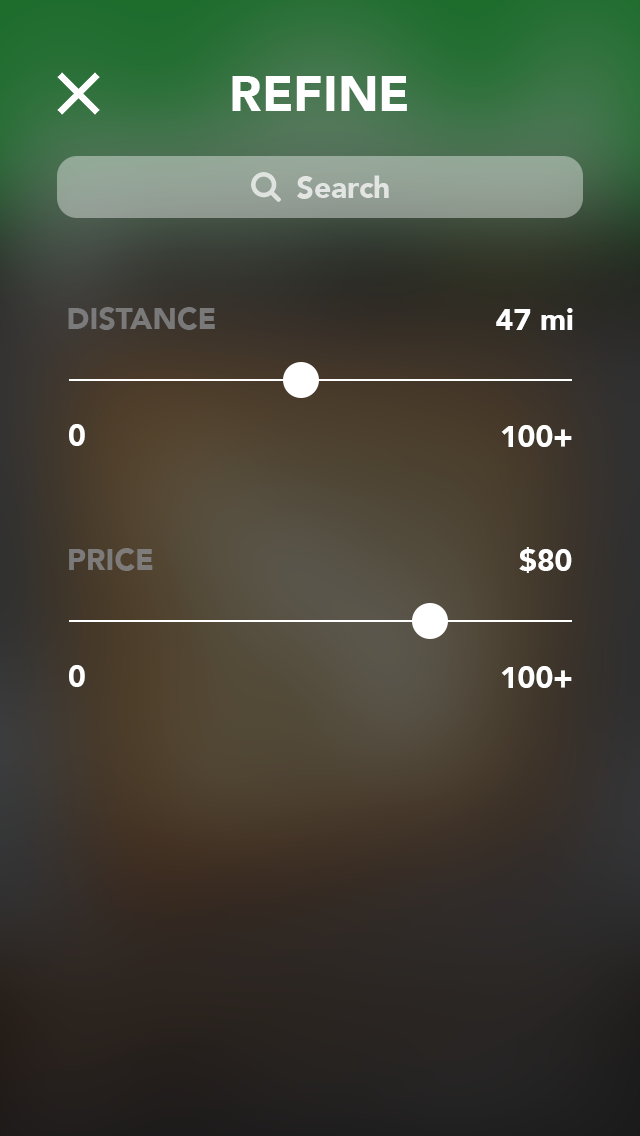
<style>
.page{position:relative;width:640px;height:1136px}
.page>*{position:absolute;margin:0}
.t1{font:50px "Avenir-Black";color:#ffffff}
.t2{font:30px "Avenir-Black";color:#e2e5e3}
.t3{font:30px "Avenir-Black";color:#7a7a7a}
.t4{font:30px "Avenir-Black";color:#ffffff}
.t5{font:30px "Avenir-Black";color:#7d7b7a}
</style>
<div class="page">
<p class="t1" style="left:232px;top:76px;width:175px;height:35px">REFINE</p>
<p class="t2" style="left:297px;top:175px;width:92px;height:24px">Search</p>
<p class="t3" style="left:68px;top:307px;width:147px;height:23px">DISTANCE</p>
<p class="t4" style="left:496px;top:308px;width:77px;height:22px">47 mi</p>
<p class="t4" style="left:69px;top:424px;width:16px;height:22px">0</p>
<p class="t4" style="left:501px;top:425px;width:71px;height:22px">100+</p>
<p class="t5" style="left:69px;top:548px;width:84px;height:23px">PRICE</p>
<p class="t4" style="left:519px;top:547px;width:53px;height:26px">$80</p>
<p class="t4" style="left:69px;top:665px;width:16px;height:22px">0</p>
<p class="t4" style="left:501px;top:666px;width:71px;height:22px">100+</p>
</div>
